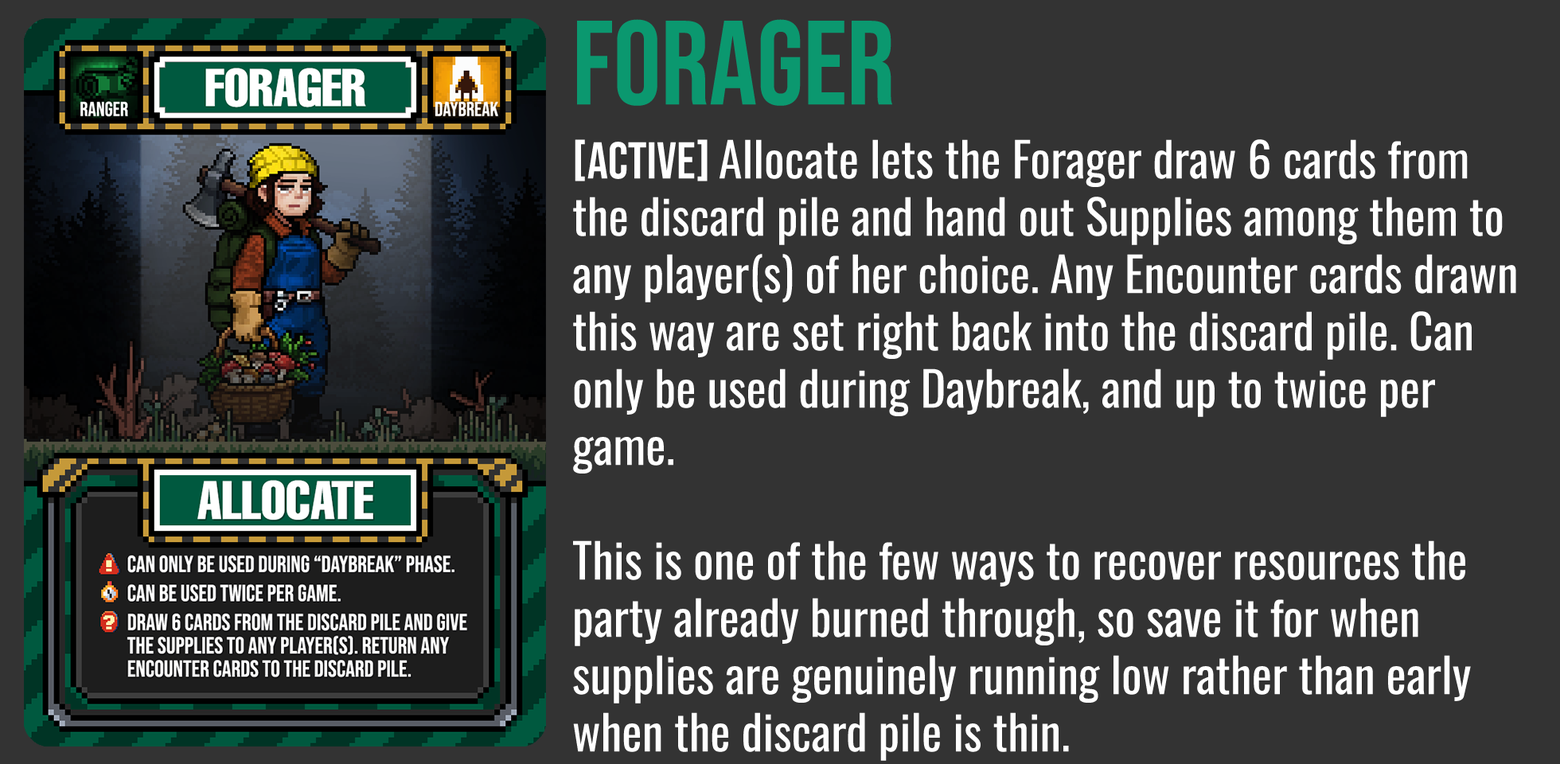
<style>
.page{position:relative;width:1560px;height:764px;background:#333333}
.page>*{position:absolute;margin:0}
.t1{font:119.4px "BebasNeue-Regular";color:#0b986f}
.t2{font:47.8px "Oswald-Regular";color:#ffffff}
.t3{font:51.7px "BebasNeue-Regular";color:#ffffff}
</style>
<div class="page">
<p class="t1" style="left:577px;top:19px;width:315px;height:87px">FORAGER</p>
<p class="t2" style="left:573px;top:139px;width:944px;height:622px"><span class="t3">[ACTIVE] </span>Allocate lets the Forager draw 6 cards from the discard pile and hand out Supplies among them to any player(s) of her choice. Any Encounter cards drawn this way are set right back into the discard pile. Can only be used during Daybreak, and up to twice per game.<br><br>This is one of the few ways to recover resources the party already burned through, so save it for when supplies are genuinely running low rather than early when the discard pile is thin.</p>
</div>
